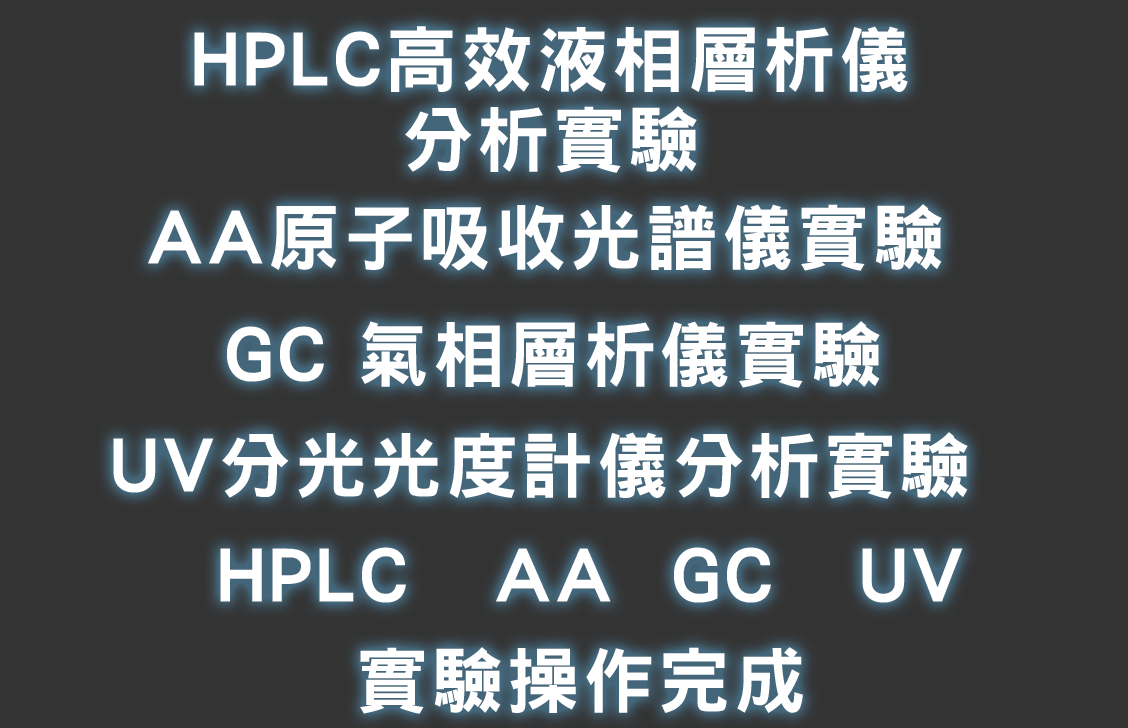
<style>
.page{position:relative;width:1128px;height:728px;background:#333333}
.page>*{position:absolute;margin:0}
.t1{font:72px/80px "DFNHei-XB-HKP-BF";letter-spacing:0.05em;color:#ffffff}
.t2{font:72px "DFNHei-XB-HKP-BF";letter-spacing:0.05em;color:#ffffff}
</style>
<div class="page">
<p class="t1" style="left:194px;top:26px;width:714px;height:147px;text-align:center">HPLC高效液相層析儀<br>分析實驗</p>
<p class="t2" style="left:148px;top:204px;width:794px;height:67px">AA原子吸收光譜儀實驗</p>
<p class="t2" style="left:227px;top:321px;width:653px;height:67px">GC 氣相層析儀實驗</p>
<p class="t2" style="left:113px;top:432px;width:855px;height:67px">UV分光光度計儀分析實驗</p>
<p class="t2" style="left:220px;top:547px;width:743px;height:56px">HPLC   AA  GC   UV</p>
<p class="t2" style="left:360px;top:647px;width:443px;height:67px">實驗操作完成</p>
</div>
